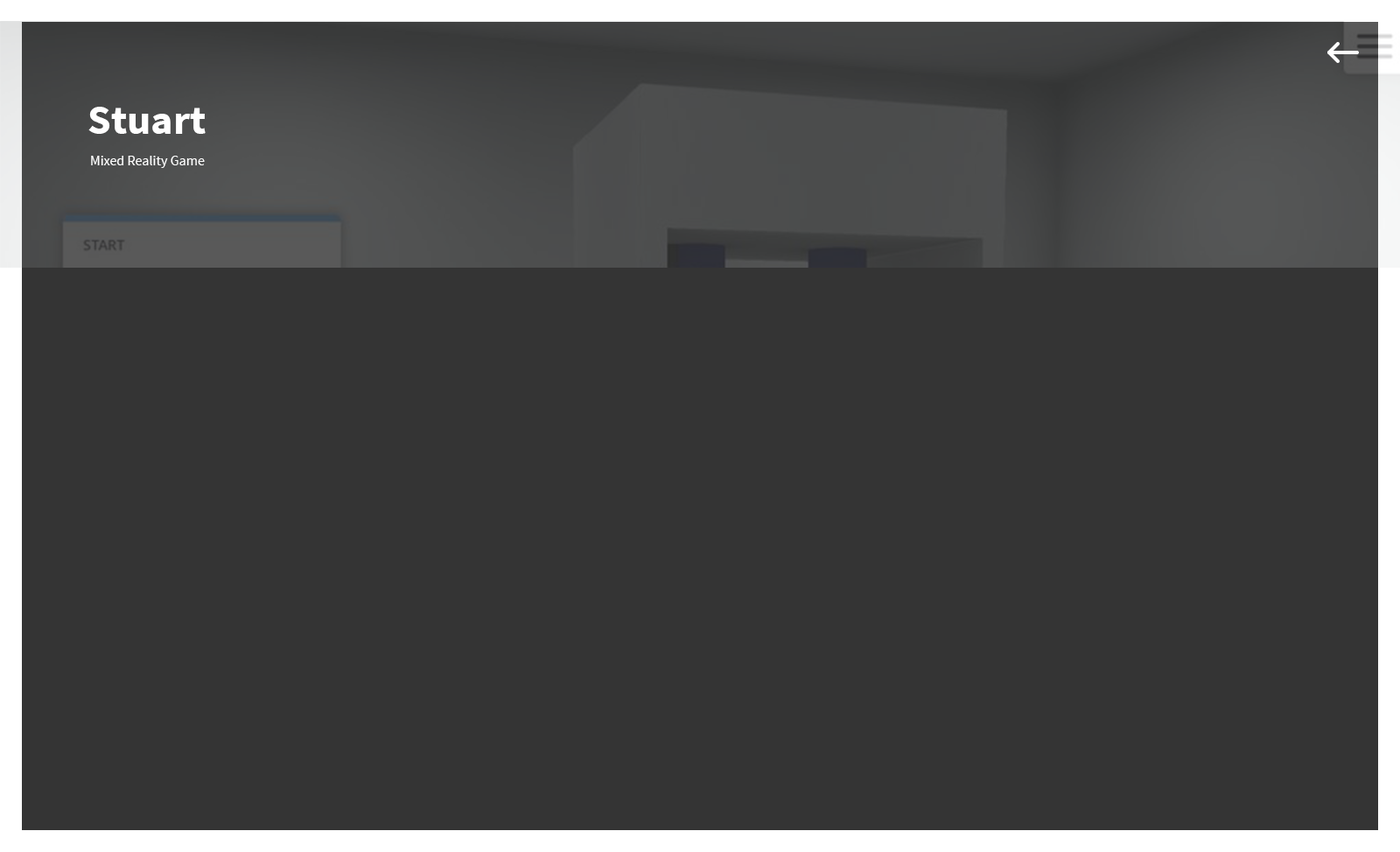
<style>
.page{position:relative;width:1400px;height:852px;background:#343434}
.page>*{position:absolute;margin:0}
.t1{font:42px "SourceSansPro-Bold";color:#ffffff}
.t2{font:14px "SourceSansPro-Regular";color:#ffffff}
</style>
<div class="page">
<p class="t1" style="left:88px;top:107px;width:118px;height:27px">Stuart</p>
<p class="t2" style="left:91px;top:156px;width:114px;height:12px">Mixed Reality Game</p>
</div>
